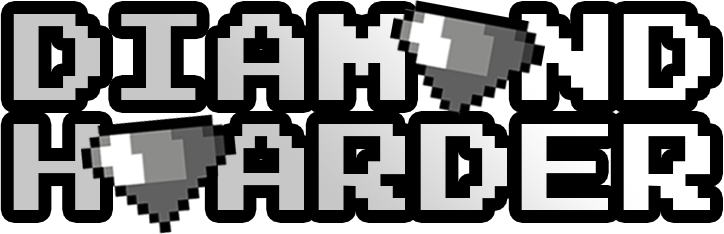
<style>
.page{position:relative;width:724px;height:234px;background:#000000}
.page>*{position:absolute;margin:0}
.t1{font:122.8px/110px "JoystixMonospace-Regular"}
</style>
<div class="page">
<p class="t1" style="left:13px;top:14px;width:697px;height:196px">diam nd<br>H ARDER</p>
</div>
